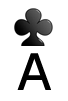
<style>
.page{position:relative;width:68px;height:101px;background:#ffffff}
.page>*{position:absolute;margin:0}
.t1{font:50px "Verdana";color:#000000;font-weight:bold}
</style>
<div class="page">
<p class="t1" style="left:17px;top:53px;width:34px;height:37px">A</p>
</div>
